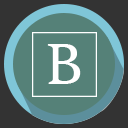
<style>
.page{position:relative;width:128px;height:128px;background:#558178}
.page>*{position:absolute;margin:0}
.t1{font:62.5px "HighTowerText-Reg";color:#ffffff}
</style>
<div class="page">
<p class="t1" style="left:47px;top:44px;width:34px;height:40px">B</p>
</div>
